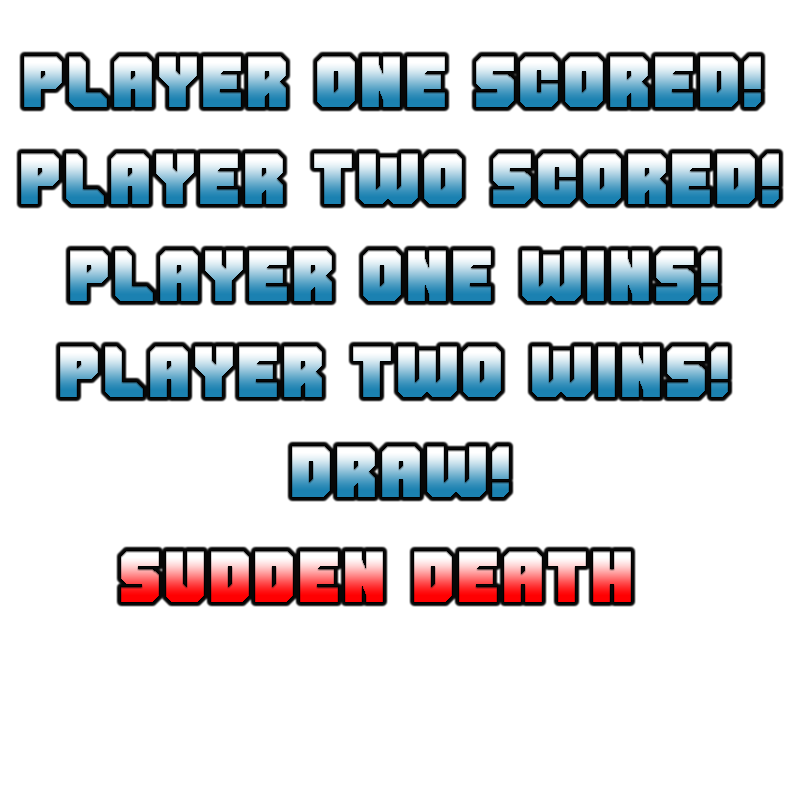
<style>
.page{position:relative;width:800px;height:800px;background:#ffffff}
.page>*{position:absolute;margin:0}
.t1{font:68px "Shumi";letter-spacing:0.05em}
</style>
<div class="page">
<p class="t1" style="left:24px;top:56px;width:737px;height:51px">PLAYER ONE SCORED!</p>
<p class="t1" style="left:21px;top:153px;width:758px;height:51px">PLAYER TWO SCORED!</p>
<p class="t1" style="left:70px;top:250px;width:648px;height:51px">PLAYER ONE Wins!</p>
<p class="t1" style="left:60px;top:346px;width:668px;height:51px">PLAYER TWO Wins!</p>
<p class="t1" style="left:292px;top:446px;width:217px;height:51px">Draw!</p>
<p class="t1" style="left:121px;top:551px;width:510px;height:51px">Sudden DEAth</p>
</div>
